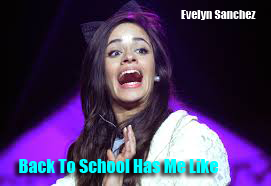
<style>
.page{position:relative;width:271px;height:186px}
.page>*{position:absolute;margin:0}
.t1{font:12px "Impact";color:#ffffff}
.t2{font:18px "Impact";color:#00ffff}
</style>
<div class="page">
<p class="t1" style="left:181px;top:10px;width:75px;height:10px">Evelyn Sanchez<br>yn Sacnhez</p>
<p class="t2" style="left:19px;top:159px;width:200px;height:14px">Back To School Has Me Like</p>
</div>
